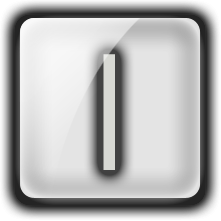
<style>
.page{position:relative;width:221px;height:221px}
.page>*{position:absolute;margin:0}
.t1{font:160.9px "CenturyGothic";letter-spacing:0.11em;color:#d8d9d4}
</style>
<div class="page">
<p class="t1" style="left:103px;top:54px;width:12px;height:116px">I</p>
</div>
